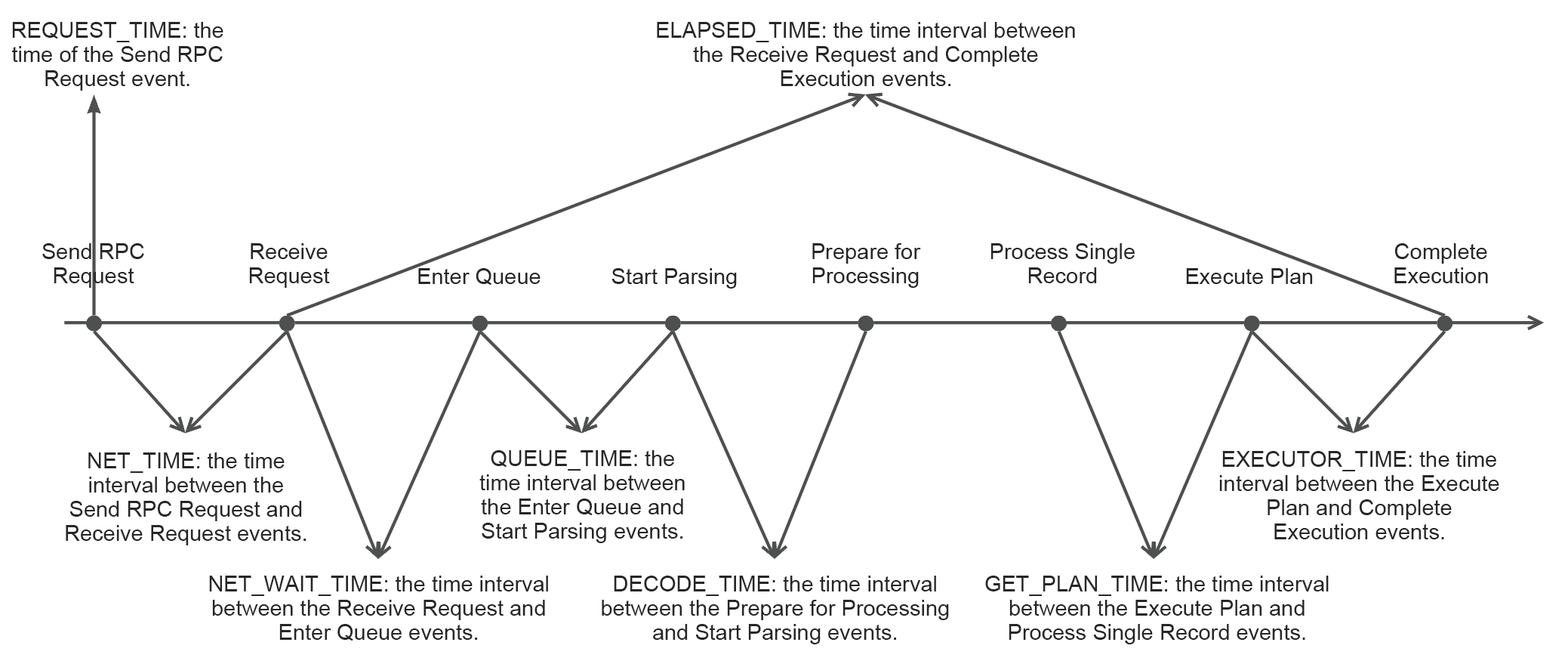
<style>
.page{position:relative;width:1568px;height:667px;background:#ffffff}
.page>*{position:absolute;margin:0}
.t1{font:21.9px/24.2px "ArialMT";color:#262626}
.t2{font:21.9px "ArialMT";color:#262626}
</style>
<div class="page">
<p class="t1" style="left:12px;top:22px;width:211px;height:69px;text-align:center">REQUEST_TIME: the time of the Send RPC Request event.</p>
<p class="t1" style="left:657px;top:22px;width:418px;height:64px;text-align:center">ELAPSED_TIME: the time interval between the Receive Request and Complete Execution events.</p>
<p class="t1" style="left:42px;top:243px;width:102px;height:45px;text-align:center">Send RPC Request</p>
<p class="t1" style="left:249px;top:243px;width:81px;height:45px;text-align:center">Receive Request</p>
<p class="t1" style="left:812px;top:243px;width:109px;height:45px;text-align:center">Prepare for Processing</p>
<p class="t1" style="left:990px;top:243px;width:145px;height:40px;text-align:center">Process Single Record</p>
<p class="t1" style="left:1394px;top:243px;width:94px;height:40px;text-align:center">Complete Execution</p>
<p class="t2" style="left:418px;top:268px;width:123px;height:17px">Enter Queue</p>
<p class="t2" style="left:611px;top:268px;width:126px;height:20px">Start Parsing</p>
<p class="t2" style="left:1186px;top:268px;width:127px;height:16px">Execute Plan</p>
<p class="t1" style="left:479px;top:450px;width:206px;height:93px;text-align:center">QUEUE_TIME: the time interval between the Enter Queue and Start Parsing events.</p>
<p class="t1" style="left:66px;top:452px;width:240px;height:93px;text-align:center">NET_TIME: the time interval between the Send RPC Request and Receive Request events.</p>
<p class="t1" style="left:1219px;top:451px;width:280px;height:88px;text-align:center">EXECUTOR_TIME: the time interval between the Execute Plan and Complete Execution events.</p>
<p class="t1" style="left:209px;top:575px;width:339px;height:65px;text-align:center">NET_WAIT_TIME: the time interval between the Receive Request and Enter Queue events.</p>
<p class="t1" style="left:602px;top:575px;width:347px;height:69px;text-align:center">DECODE_TIME: the time interval between the Prepare for Processing and Start Parsing events.</p>
<p class="t1" style="left:985px;top:575px;width:344px;height:69px;text-align:center">GET_PLAN_TIME: the time interval between the Execute Plan and Process Single Record events.</p>
</div>
